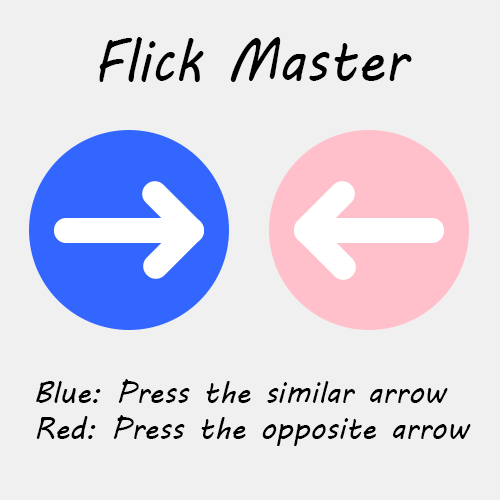
<style>
.page{position:relative;width:500px;height:500px;background:#f0f0f0}
.page>*{position:absolute;margin:0}
.t1{font:60px "MVBoli";color:#000000;scale:0.92 1}
.t2{font:30px "MVBoli";color:#000000}
</style>
<div class="page">
<p class="t1" style="left:99px;top:37px;width:313px;height:45px">Flick Master</p>
<p class="t2" style="left:36px;top:379px;width:435px;height:67px;text-align:right">Blue: Press the similar arrow<br>Red: Press the opposite arrow</p>
</div>
